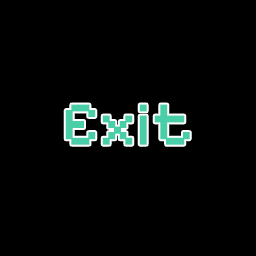
<style>
.page{position:relative;width:256px;height:256px;background:#000000}
.page>*{position:absolute;margin:0}
.t1{font:62.5px "PixelifySans-Medium";color:#49cea7}
</style>
<div class="page">
<p class="t1" style="left:65px;top:104px;width:125px;height:41px">Exit</p>
</div>
